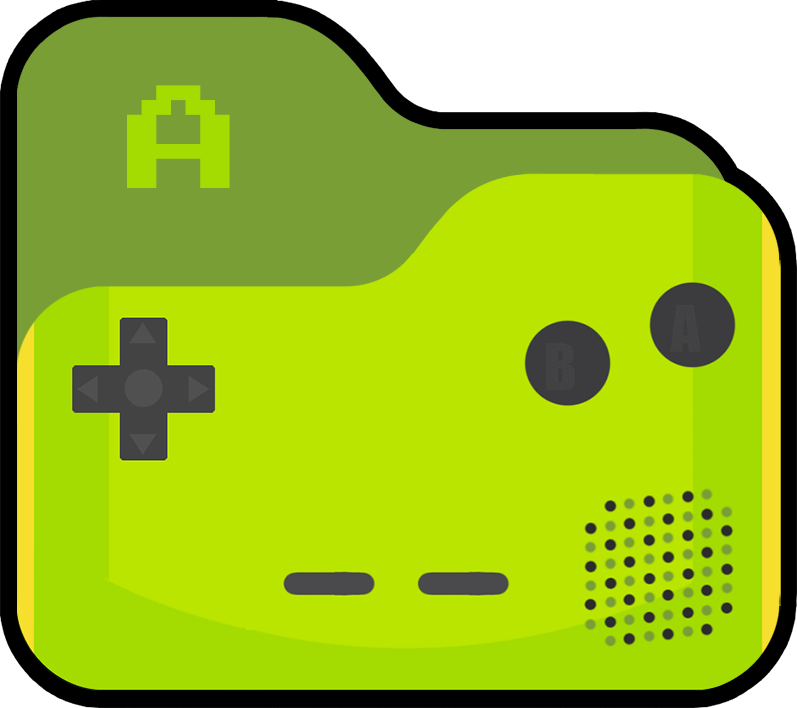
<style>
.page{position:relative;width:797px;height:708px;background:#b9e500}
.page>*{position:absolute;margin:0}
.t1{font:150px "PixelEmulator";color:#a4db00}
</style>
<div class="page">
<p class="t1" style="left:127px;top:85px;width:103px;height:103px">A</p>
</div>
